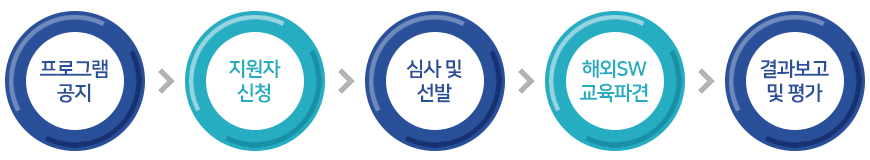
<style>
.page{position:relative;width:870px;height:160px;background:#ffffff}
.page>*{position:absolute;margin:0}
.t1{font:20px/24px "NanumSquareB";letter-spacing:-0.05em;color:#295098}
.t2{font:20px/24px "NanumSquareB";letter-spacing:-0.05em;color:#27adc1}
</style>
<div class="page">
<p class="t1" style="left:40px;top:59px;width:68px;height:44px;text-align:center">프로그램<br>공지</p>
<p class="t2" style="left:229px;top:59px;width:52px;height:44px;text-align:center">지원자<br>신청</p>
<p class="t1" style="left:406px;top:59px;width:56px;height:44px;text-align:center">심사 및<br>선발</p>
<p class="t2" style="left:580px;top:59px;width:68px;height:44px;text-align:center">해외SW<br>교육파견</p>
<p class="t1" style="left:760px;top:59px;width:69px;height:44px;text-align:center">결과보고<br>및 평가</p>
</div>
